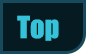
<style>
.page{position:relative;width:86px;height:54px;background:#051a21}
.page>*{position:absolute;margin:0}
.t1{font:28.2px "Impact";color:#34c3d9}
</style>
<div class="page">
<p class="t1" style="left:17px;top:15px;width:42px;height:26px">Top</p>
</div>
